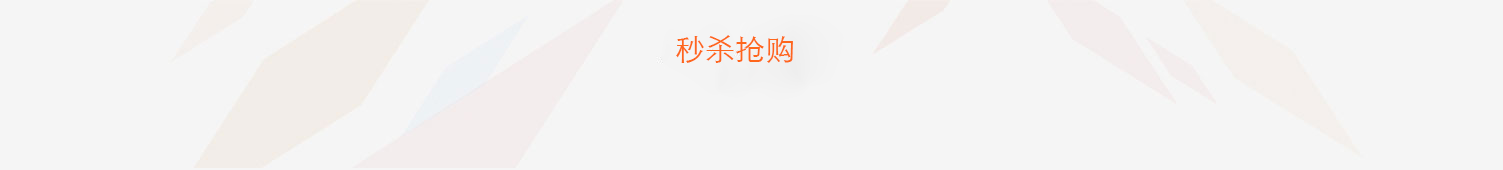
<style>
.page{position:relative;width:1503px;height:170px;background:#f5f5f5}
.page>*{position:absolute;margin:0}
.t1{font:30px "STHeitiSC-Light";color:#fe661c}
</style>
<div class="page">
<p class="t1" style="left:676px;top:35px;width:117px;height:28px">秒杀抢购</p>
</div>
